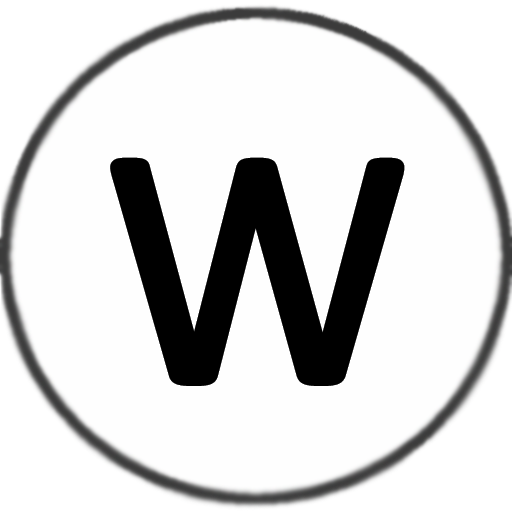
<style>
.page{position:relative;width:512px;height:512px;background:#fefefe}
.page>*{position:absolute;margin:0}
.t1{font:343.2px "Calibri";color:#000000;font-weight:bold}
</style>
<div class="page">
<p class="t1" style="left:110px;top:157px;width:295px;height:229px">W</p>
</div>
